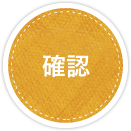
<style>
.page{position:relative;width:131px;height:131px;background:#ffffff}
.page>*{position:absolute;margin:0}
.t1{font:24px "HiraKakuProN-W6";color:#ffffff}
</style>
<div class="page">
<p class="t1" style="left:42px;top:54px;width:48px;height:24px">確認</p>
</div>
